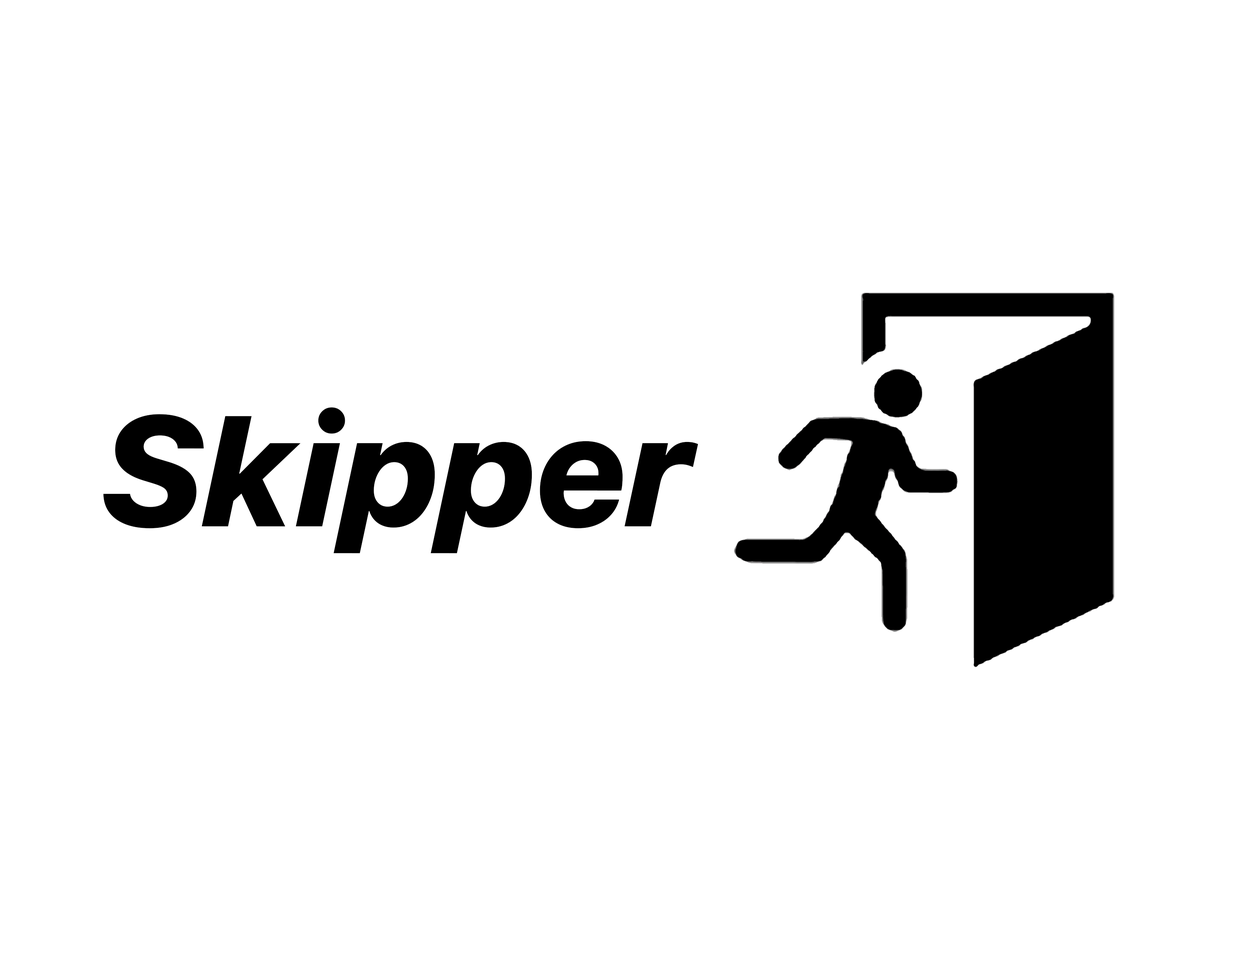
<style>
.page{position:relative;width:1242px;height:960px;background:#ffffff}
.page>*{position:absolute;margin:0}
.t1{font:156.4px "SFPro-HeavyItalic";color:#000000}
</style>
<div class="page">
<p class="t1" style="left:103px;top:407px;width:595px;height:146px">Skipper</p>
</div>
